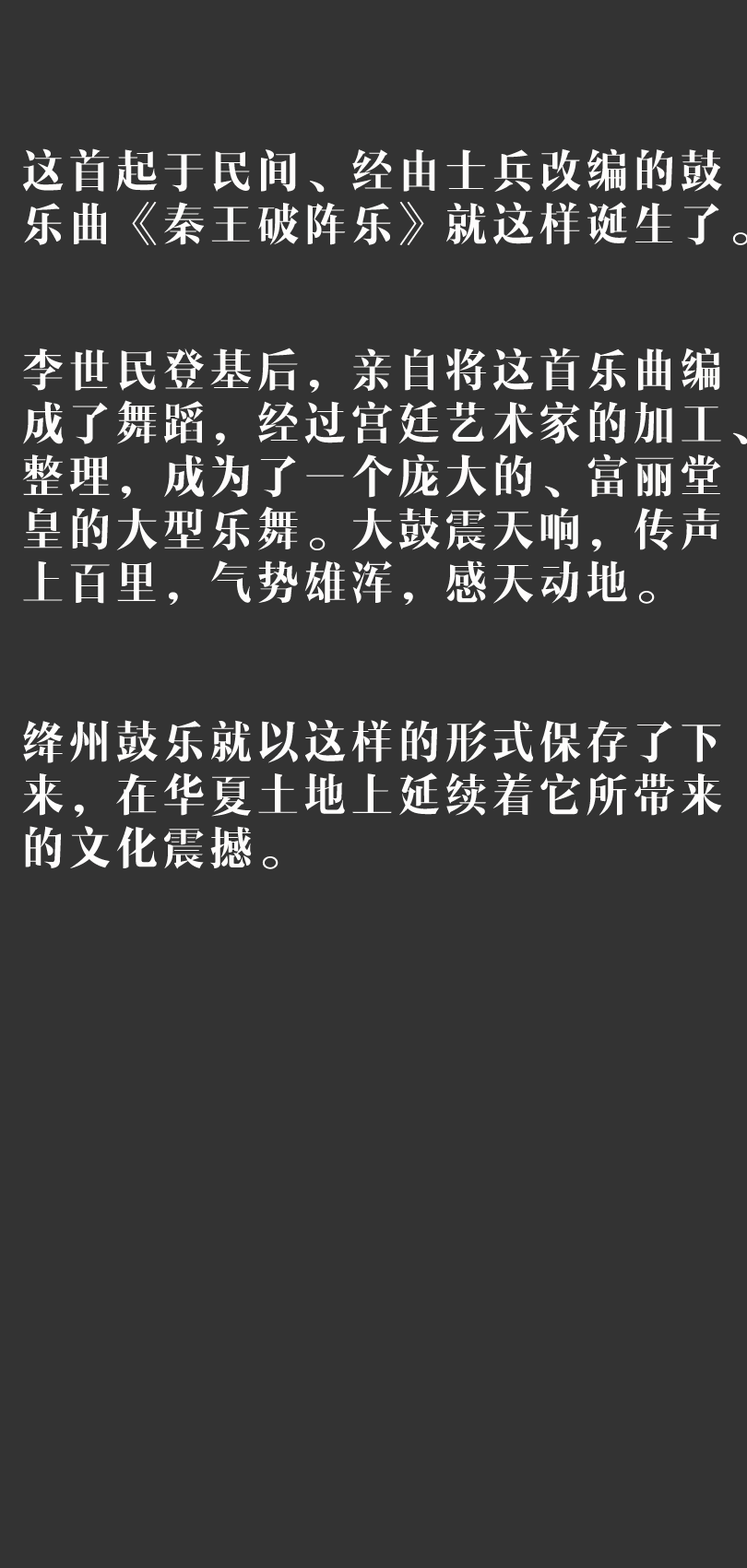
<style>
.page{position:relative;width:747px;height:1568px;background:#333333}
.page>*{position:absolute;margin:0}
.t1{font:46.1px/13.3px "MFJunYa_Noncommercial-Regular";letter-spacing:0.1em;color:#fefdfc;text-transform:uppercase;scale:1.2 1}
</style>
<div class="page">
<p class="t1" style="left:22px;top:148px;width:727px;height:721px">这首起于民间、经由士兵改编的鼓<br><br><br><br>乐曲《秦王破阵乐》就这样诞生了。<br><br><br><br><br><br><br><br><br><br><br>李世民登基后，亲自将这首乐曲编<br><br><br><br>成了舞蹈，经过宫廷艺术家的加工、<br><br><br><br>整理，成为了一个庞大的、富丽堂<br><br><br><br>皇的大型乐舞。大鼓震天响，传声<br><br><br><br>上百里，气势雄浑，感天动地。<br><br><br><br><br><br><br><br><br><br><br><br>绛州鼓乐就以这样的形式保存了下<br><br><br><br>来，在华夏土地上延续着它所带来<br><br><br><br>的文化震撼。</p>
</div>
